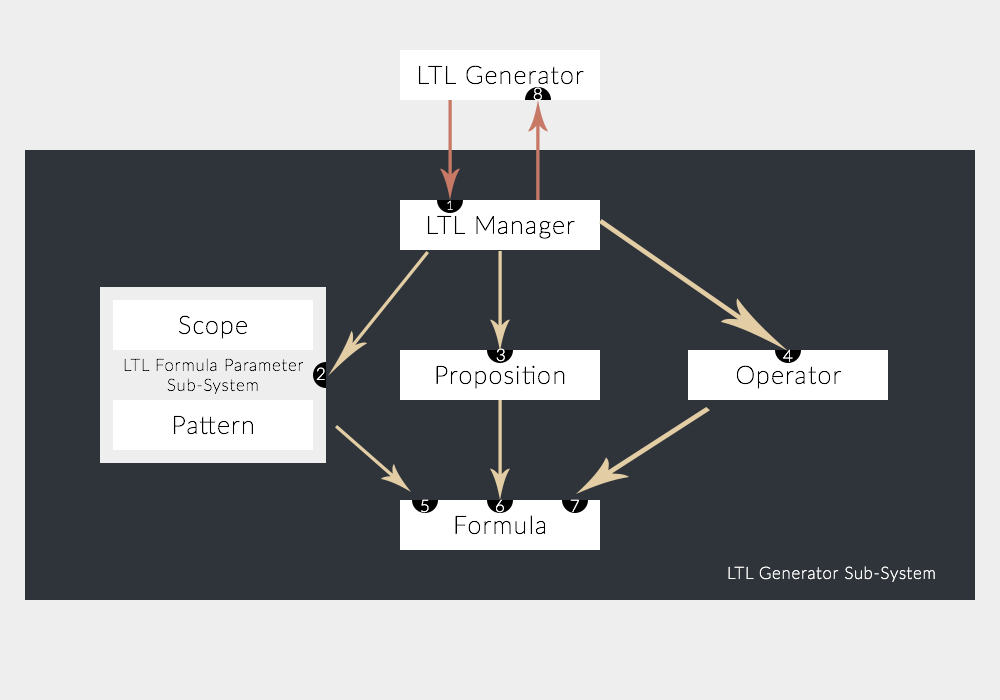
<style>
.page{position:relative;width:1000px;height:700px;background:#2f343b}
.page>*{position:absolute;margin:0}
.t1{font:25px "Lato-Thin";letter-spacing:0.05em;color:#000000}
.t2{font:16.7px "Lato-Thin";letter-spacing:0.05em;color:#ffffff}
.t3{font:12.5px "Lato-Thin";letter-spacing:0.05em}
.t4{font:16.7px "Lato-Thin";letter-spacing:0.05em;color:#000000}
</style>
<div class="page">
<p class="t1" style="left:418px;top:65px;width:166px;height:20px">LTL Generator</p>
<p class="t2" style="left:533px;top:87px;width:9px;height:14px">8</p>
<p class="t3" style="left:447px;top:200px;width:6px;height:10px">1</p>
<p class="t1" style="left:427px;top:215px;width:148px;height:24px">LTL Manager</p>
<p class="t1" style="left:178px;top:315px;width:69px;height:24px">Scope</p>
<p class="t2" style="left:496px;top:348px;width:9px;height:14px">3</p>
<p class="t2" style="left:783px;top:349px;width:10px;height:13px">4</p>
<p class="t4" style="left:124px;top:358px;width:180px;height:36px;text-align:center">LTL Formula Parameter Sub-System</p>
<p class="t1" style="left:436px;top:365px;width:129px;height:24px">Proposition</p>
<p class="t1" style="left:736px;top:365px;width:106px;height:24px">Operator</p>
<p class="t2" style="left:316px;top:367px;width:9px;height:13px">2</p>
<p class="t1" style="left:173px;top:415px;width:80px;height:20px">Pattern</p>
<p class="t2" style="left:421px;top:499px;width:8px;height:14px">5</p>
<p class="t2" style="left:496px;top:499px;width:8px;height:14px">6</p>
<p class="t2" style="left:570px;top:499px;width:9px;height:13px">7</p>
<p class="t1" style="left:455px;top:515px;width:91px;height:20px">Formula</p>
<p class="t2" style="left:728px;top:566px;width:207px;height:16px">LTL Generator Sub-System</p>
</div>
